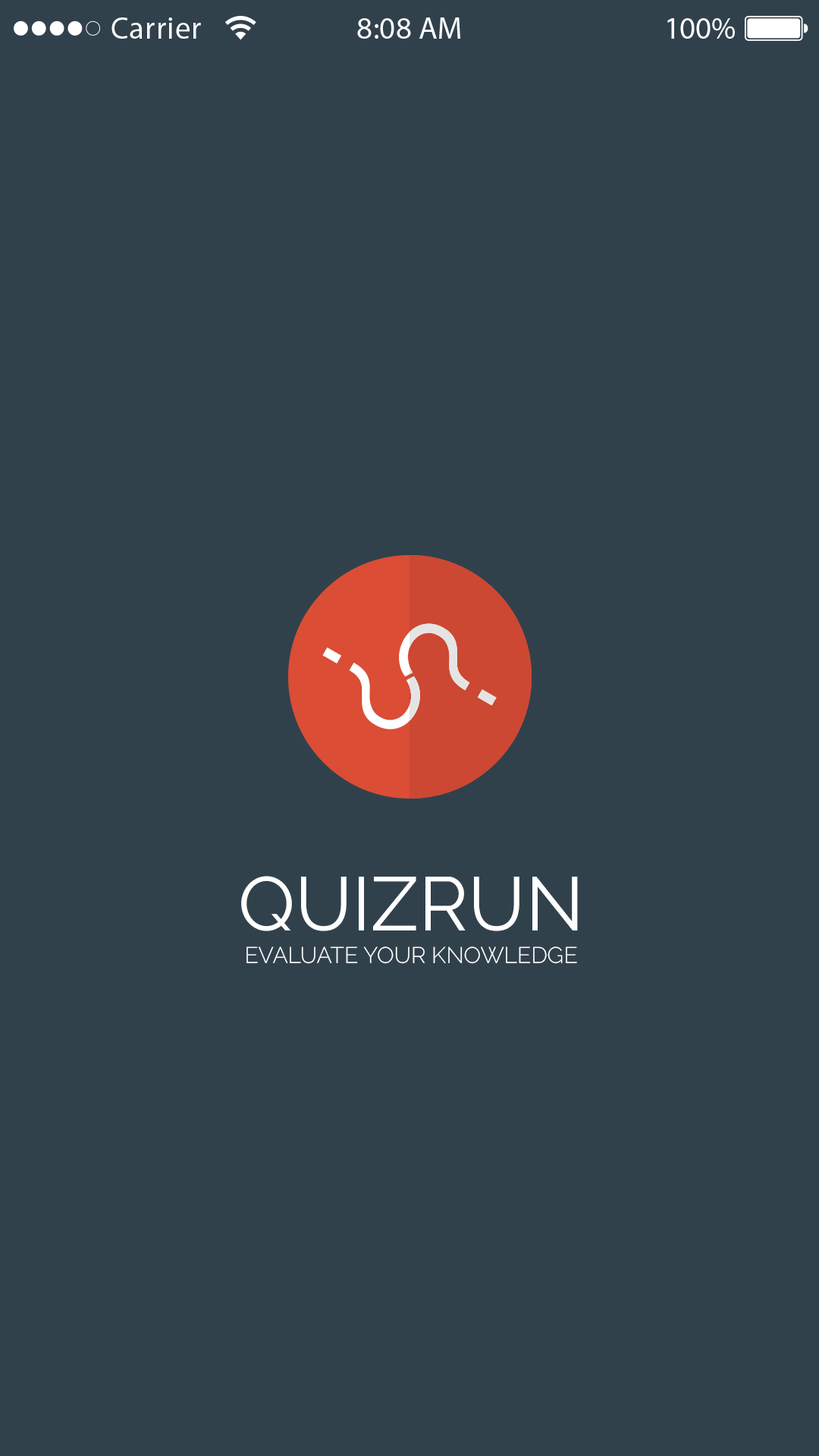
<style>
.page{position:relative;width:819px;height:1456px;background:#31414c}
.page>*{position:absolute;margin:0}
.t1{font:151.7px "Raleway-Regular";color:#e5e4e4;text-transform:uppercase}
.t2{font:151.7px "Raleway-Regular";color:#ffffff;text-transform:uppercase}
.t3{font:75.8px "Raleway-Regular";color:#ffffff;text-transform:uppercase}
.t4{font:22.7px "Raleway-Light";color:#ffffff;text-transform:uppercase}
</style>
<div class="page">
<p class="t1" style="left:399px;top:623px;width:98px;height:83px;rotate:-60deg">?</p>
<p class="t1" style="left:399px;top:623px;width:98px;height:83px;rotate:-60deg">?</p>
<p class="t2" style="left:322px;top:647px;width:98px;height:83px;rotate:120deg">?</p>
<p class="t2" style="left:322px;top:647px;width:98px;height:83px;rotate:120deg">?</p>
<p class="t3" style="left:241px;top:876px;width:337px;height:55px">QUIZRUN</p>
<p class="t4" style="left:246px;top:946px;width:331px;height:18px">evaluate your knowledge</p>
</div>
